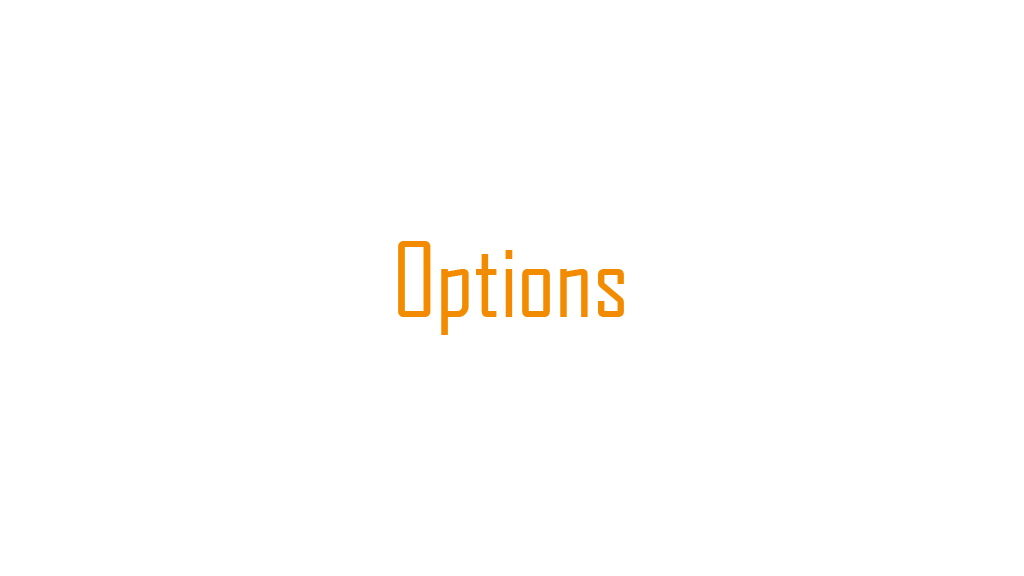
<style>
.page{position:relative;width:1024px;height:576px;background:#ffffff}
.page>*{position:absolute;margin:0}
.t1{font:100px "AgencyFB-Reg";color:#f28b00}
</style>
<div class="page">
<p class="t1" style="left:398px;top:241px;width:226px;height:94px">Options</p>
</div>
